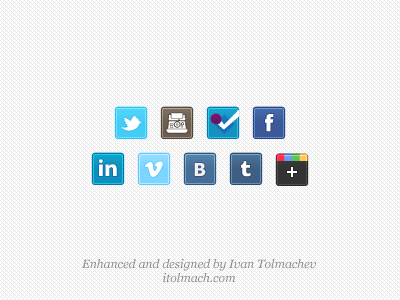
<style>
.page{position:relative;width:400px;height:300px;background:#ffffff}
.page>*{position:absolute;margin:0}
.t1{font:24px "MyriadPro-Bold";color:#ffffff}
.t2{font:18px "Tahoma-Bold";color:#f1f1f1}
.t3{font:12px "Georgia-Italic";color:#898989}
</style>
<div class="page">
<p class="t1" style="left:99px;top:159px;width:18px;height:17px">in</p>
<p class="t2" style="left:194px;top:163px;width:12px;height:13px">В</p>
<p class="t3" style="left:81px;top:259px;width:235px;height:24px;text-align:center">Enhanced and designed by Ivan Tolmachev<br>itolmach.com</p>
</div>
